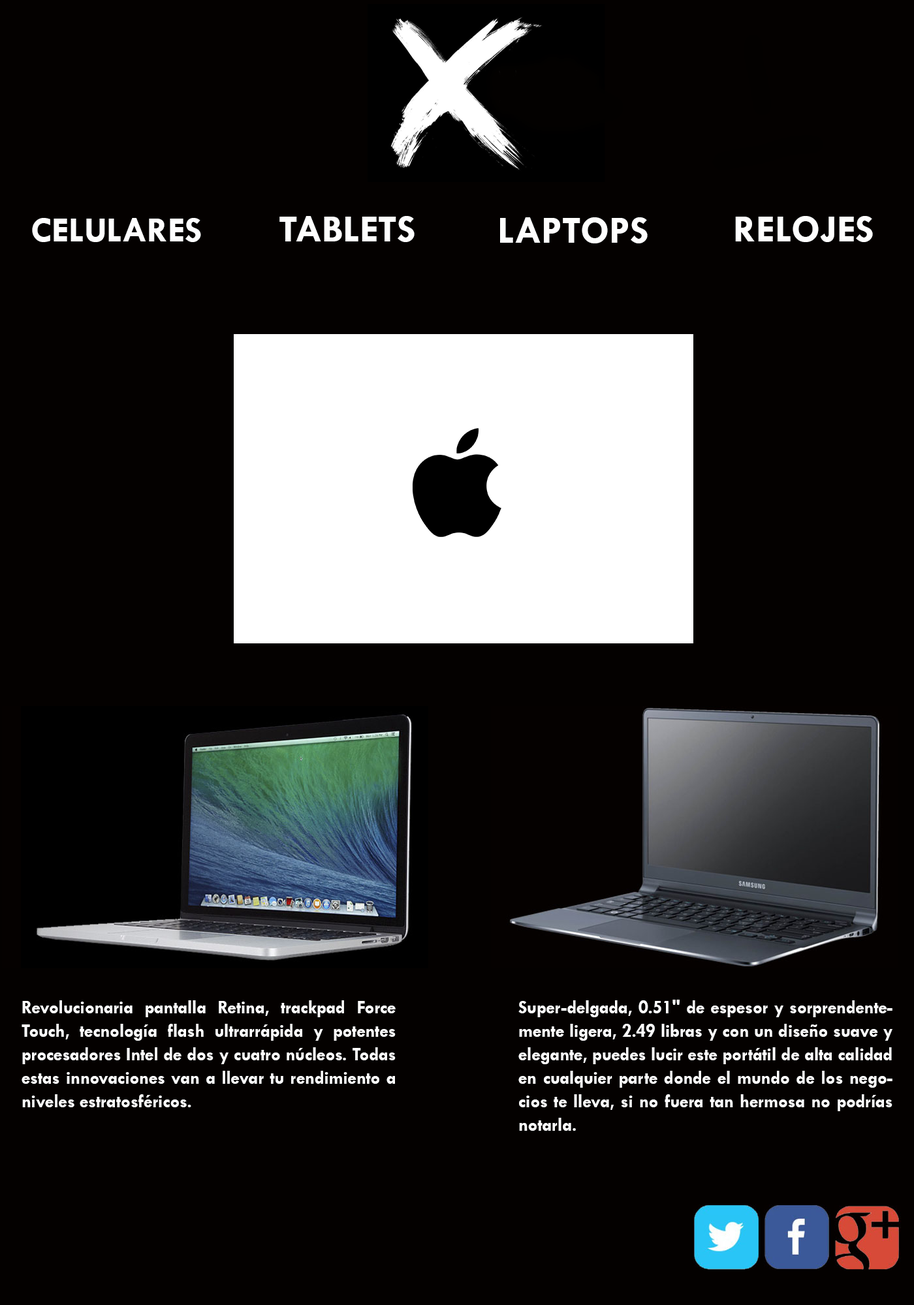
<style>
.page{position:relative;width:914px;height:1305px;background:#040100}
.page>*{position:absolute;margin:0}
.t1{font:35.9px "TwCenMT-Bold";color:#fefefe}
.t2{font:19.6px "TwCenMT-Bold";color:#fefefe}
.t3{font:39.2px "TwCenMT-Bold";color:#fefefe}
.t4{font:19.6px "TwCenMT-Bold";color:#fefefe;scale:0.92 1}
</style>
<div class="page">
<p class="t1" style="left:32px;top:218px;width:169px;height:24px"><span class="t2"><br></span>CELULARES</p>
<p class="t3" style="left:279px;top:216px;width:135px;height:26px">TABLETS</p>
<p class="t3" style="left:500px;top:217px;width:147px;height:26px">LAPTOPS</p>
<p class="t3" style="left:735px;top:216px;width:138px;height:26px">RELOJES</p>
<p class="t4" style="left:22px;top:1000px;width:373px;height:107px;text-align:justify">Revolucionaria pantalla Retina, trackpad Force Touch, tecnología flash ultrarrápida y potentes procesadores Intel de dos y cuatro núcleos. Todas estas innovaciones van a llevar tu rendimiento a niveles estratosféricos.</p>
<p class="t4" style="left:518px;top:1000px;width:374px;height:131px;text-align:justify">Super-delgada, 0.51" de espesor y sorprendentemente ligera, 2.49 libras y con un diseño suave y elegante, puedes lucir este portátil de alta calidad en cualquier parte donde el mundo de los negocios te lleva, si no fuera tan hermosa no podrías notarla.</p>
</div>
